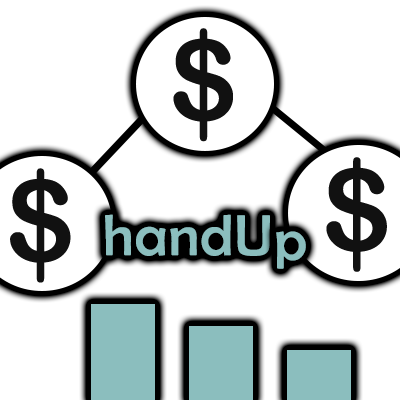
<style>
.page{position:relative;width:400px;height:400px;background:#ffffff}
.page>*{position:absolute;margin:0}
.t1{font:111.9px "ArialRoundedMTBold";letter-spacing:0.025em;color:#111111;scale:1.04 1}
.t2{font:113.6px "ArialRoundedMTBold";letter-spacing:0.025em;color:#111111;scale:1.04 1}
.t3{font:113.3px "ArialRoundedMTBold";letter-spacing:0.025em;color:#111111;scale:1.04 1}
.t4{font:58.2px "BerlinSansFB-Reg";letter-spacing:0.025em;color:#8bbebe}
</style>
<div class="page">
<p class="t1" style="left:173px;top:28px;width:60px;height:114px">$</p>
<p class="t2" style="left:326px;top:157px;width:61px;height:115px">$</p>
<p class="t3" style="left:10px;top:168px;width:61px;height:115px">$</p>
<p class="t4" style="left:105px;top:214px;width:165px;height:42px">handU</p>
<p class="t4" style="left:276px;top:231px;width:30px;height:38px">p</p>
</div>
